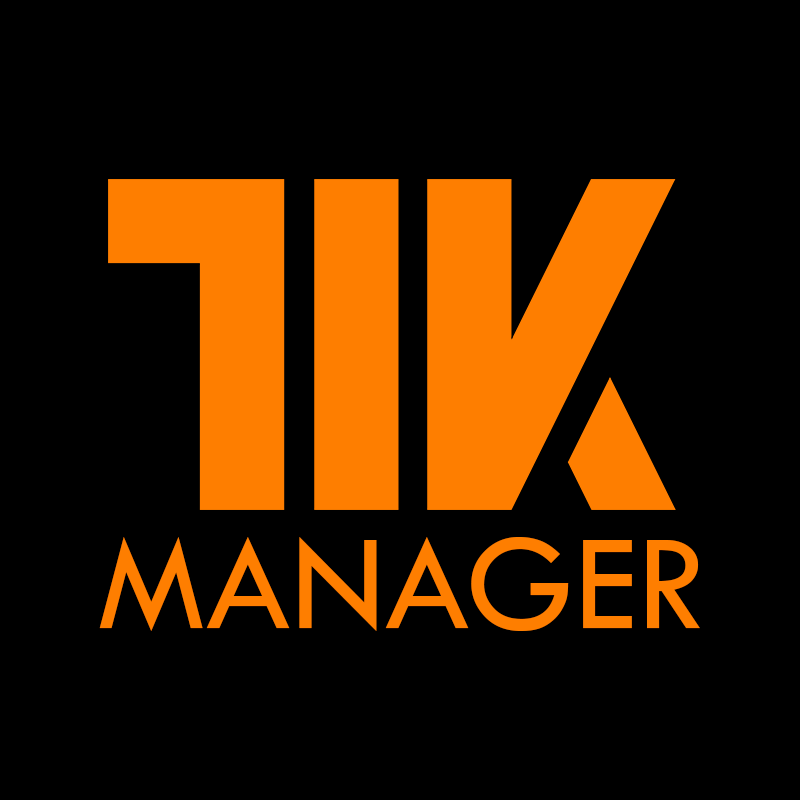
<style>
.page{position:relative;width:800px;height:800px;background:#000000}
.page>*{position:absolute;margin:0}
.t1{font:141px "TwCenMT-Regular";color:#fe7e00}
</style>
<div class="page">
<p class="t1" style="left:99px;top:537px;width:601px;height:94px">MANAGER</p>
</div>
